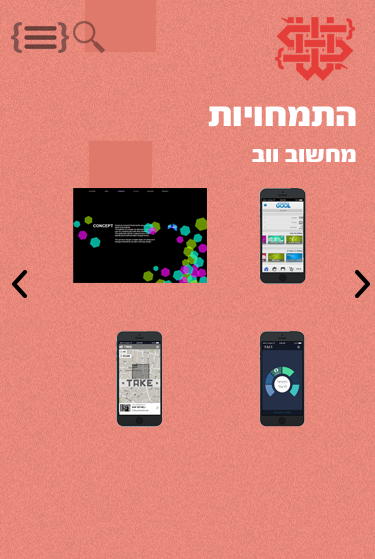
<style>
.page{position:relative;width:375px;height:559px}
.page>*{position:absolute;margin:0}
.t1{font:37.2px "FbScorpion-Black";color:#ffffff}
.t2{font:25px "FbScorpion-Black";color:#ffffff}
</style>
<div class="page">
<p class="t1" style="left:208px;top:106px;width:148px;height:21px">תויוחמתה</p>
<p class="t2" style="left:252px;top:148px;width:104px;height:14px">בוו בושחמ</p>
</div>
